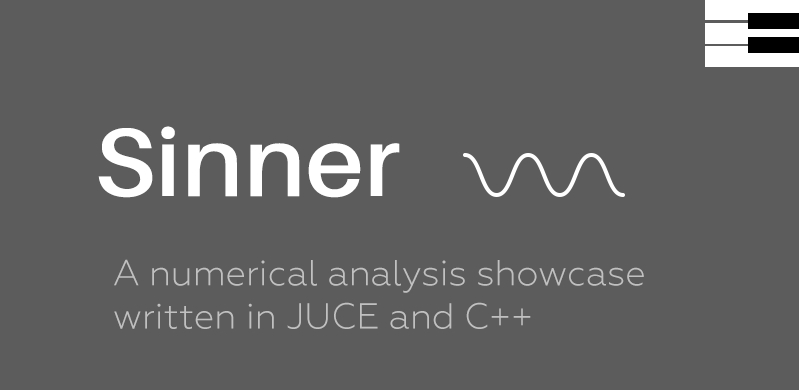
<style>
.page{position:relative;width:799px;height:390px;background:#5c5c5c}
.page>*{position:absolute;margin:0}
.t1{font:96.6px "Aileron-SemiBold";color:#ffffff;scale:1.07 1}
.t2{font:36px "Geometria-Light";color:#c0c0c0}
</style>
<div class="page">
<p class="t1" style="left:98px;top:126px;width:302px;height:72px">Sinner</p>
<p class="t2" style="left:114px;top:259px;width:530px;height:70px">A numerical analysis showcase written in JUCE and C++</p>
</div>
